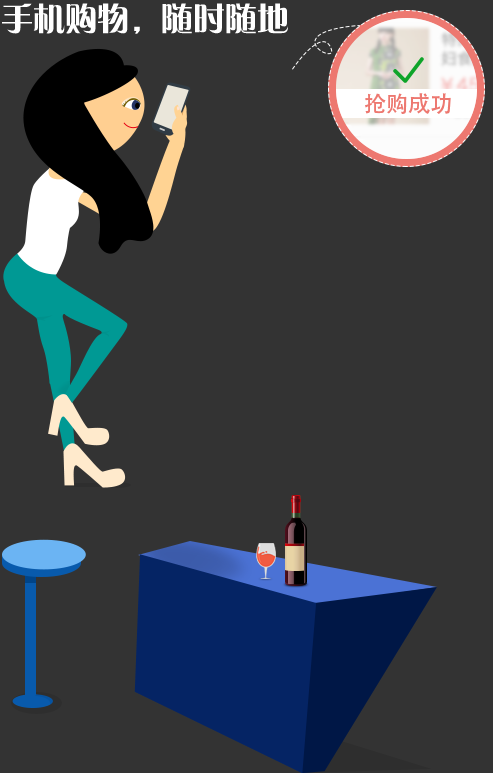
<style>
.page{position:relative;width:493px;height:773px;background:#333333}
.page>*{position:absolute;margin:0}
.t1{font:32px "FZCQJW--GB1-0";color:#ffffff}
</style>
<div class="page">
<p class="t1" style="left:2px;top:3px;width:286px;height:31px">手机购物，随时随地</p>
</div>
